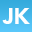
<style>
.page{position:relative;width:32px;height:32px}
.page>*{position:absolute;margin:0}
.t1{font:23.2px "Avenir-Black";color:#ffffff;scale:0.93 1}
</style>
<div class="page">
<p class="t1" style="left:2px;top:8px;width:28px;height:16px">JK</p>
</div>
